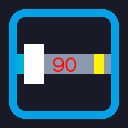
<style>
.page{position:relative;width:128px;height:128px;background:#181a26}
.page>*{position:absolute;margin:0}
.t1{font:21.3px "©M¥­²Ê¶ê";color:#ff0000}
</style>
<div class="page">
<p class="t1" style="left:52px;top:57px;width:25px;height:16px">90</p>
</div>
